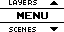
<style>
.page{position:relative;width:64px;height:32px;background:#ffffff}
.page>*{position:absolute;margin:0}
.t1{font:8px "04b03";color:#000000;scale:1.06 1}
.t2{font:14px "ArcadeClassic";color:#000000;scale:1.05 1}
</style>
<div class="page">
<p class="t1" style="left:9px;top:0px;width:28px;height:5px">LAYERS</p>
<p class="t2" style="left:17px;top:12px;width:31px;height:7px">MENU</p>
<p class="t1" style="left:9px;top:27px;width:27px;height:5px">SCENES</p>
</div>
